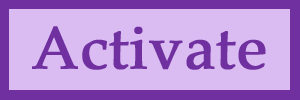
<style>
.page{position:relative;width:300px;height:100px;background:#dbbcf2}
.page>*{position:absolute;margin:0}
.t1{font:60px "PalatinoLinotype-Roman";color:#7030a0;font-weight:bold}
</style>
<div class="page">
<p class="t1" style="left:32px;top:26px;width:234px;height:44px">Activate</p>
</div>
